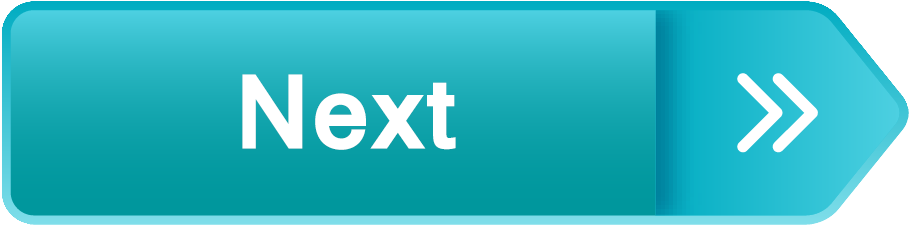
<style>
.page{position:relative;width:909px;height:225px}
.page>*{position:absolute;margin:0}
.t1{font:100px "Mangal-Bold";color:#ffffff}
</style>
<div class="page">
<p class="t1" style="left:242px;top:74px;width:214px;height:76px">Next</p>
</div>
